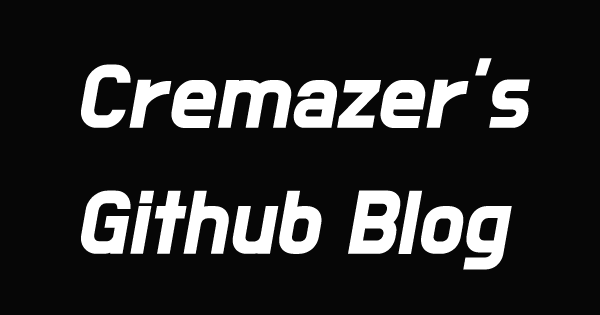
<style>
.page{position:relative;width:600px;height:315px;background:#060606}
.page>*{position:absolute;margin:0}
.t1{font:72px "BMDoHyeon";color:#ffffff;font-weight:bold;font-style:italic}
</style>
<div class="page">
<p class="t1" style="left:81px;top:58px;width:449px;height:212px">Cremazer’s<br>Github Blog</p>
</div>
